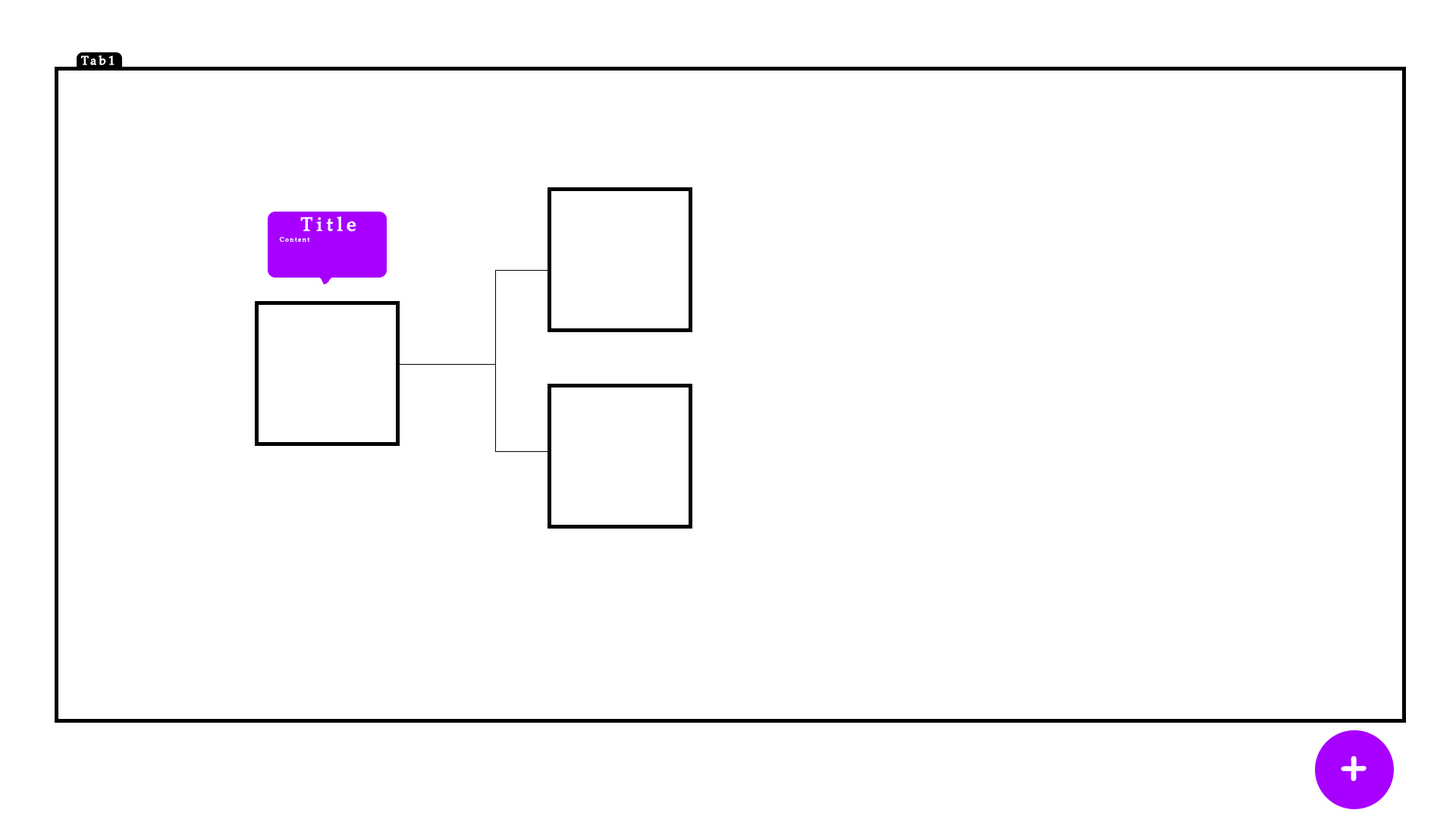
<style>
.page{position:relative;width:1456px;height:819px;background:#ffffff}
.page>*{position:absolute;margin:0}
.t1{font:12.1px "PalatinoLinotype-Roman";letter-spacing:0.2em;color:#ffffff;font-weight:bold}
.t2{font:19px "PalatinoLinotype-Roman";letter-spacing:0.2em;color:#ffffff;font-weight:bold}
.t3{font:6.1px "PalatinoLinotype-Roman";letter-spacing:0.2em;color:#ffffff;font-weight:bold}
.t4{font:75.8px "LifeSavers-Regular";letter-spacing:0.2em;color:#ffffff;font-weight:bold}
</style>
<div class="page">
<p class="t1" style="left:81px;top:55px;width:34px;height:10px">Tab1</p>
<p class="t2" style="left:300px;top:216px;width:56px;height:15px">Title</p>
<p class="t3" style="left:279px;top:237px;width:31px;height:5px">Content</p>
<p class="t4" style="left:1341px;top:756px;width:25px;height:25px">+</p>
</div>
